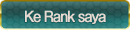
<style>
.page{position:relative;width:130px;height:30px}
.page>*{position:absolute;margin:0}
.t1{font:14px "GothicMB101Pro-Regular";letter-spacing:-0.08em;color:#e6dad2;font-weight:bold;scale:0.9 1}
</style>
<div class="page">
<p class="t1" style="left:25px;top:10px;width:81px;height:14px">Ke Rank saya</p>
</div>
